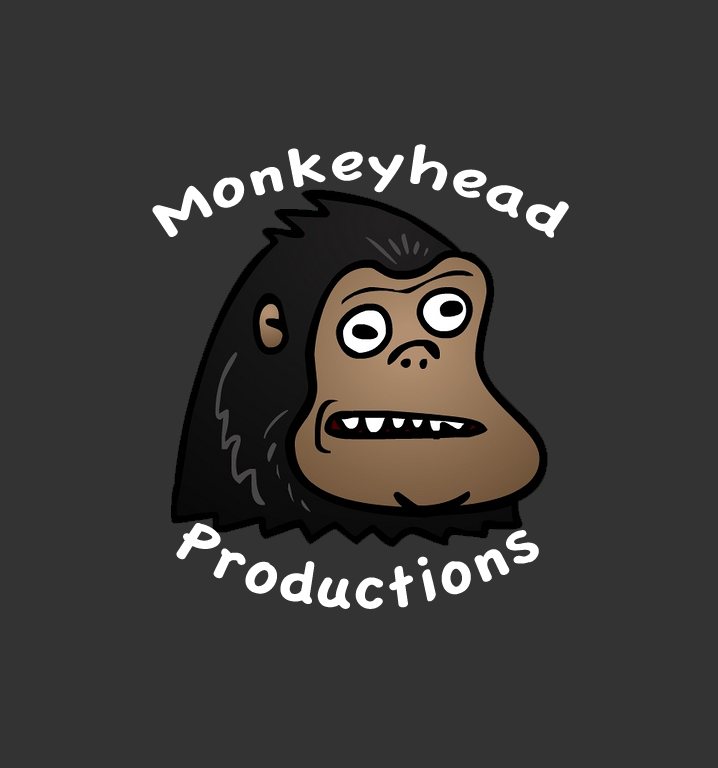
<style>
.page{position:relative;width:718px;height:768px;background:#333333}
.page>*{position:absolute;margin:0}
.t1{font:56.1px "AppleCasual";color:#ffffff}
.t2{font:63.3px "AppleCasual";color:#ffffff}
</style>
<div class="page">
<p class="t1" style="left:152px;top:144px;width:417px;height:94px">Monkeyhead</p>
<p class="t2" style="left:176px;top:523px;width:363px;height:86px">Productions</p>
</div>
